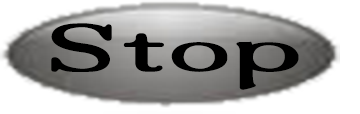
<style>
.page{position:relative;width:360px;height:114px;background:#ffffff}
.page>*{position:absolute;margin:0}
.t1{font:94.7px "18thCentury";color:#000000;scale:1.79 1}
</style>
<div class="page">
<p class="t1" style="left:51px;top:23px;width:248px;height:67px">Stop</p>
</div>
